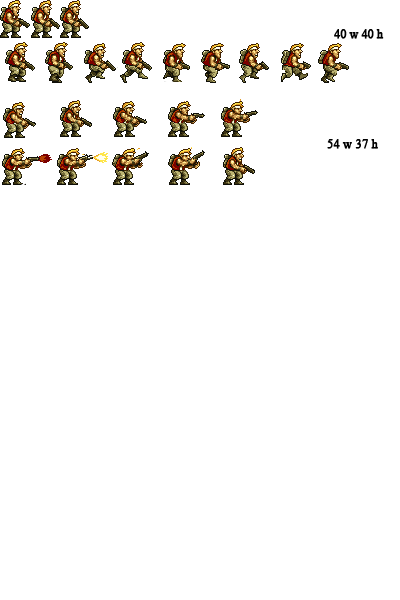
<style>
.page{position:relative;width:400px;height:600px;background:#ffffff}
.page>*{position:absolute;margin:0}
.t1{font:12.3px "TimesNewRomanPSMT";color:#000000;font-weight:bold;scale:0.94 1}
.t2{font:12.3px "TimesNewRomanPSMT";color:#000000;font-weight:bold}
</style>
<div class="page">
<p class="t1" style="left:334px;top:29px;width:50px;height:10px">40 w 40 h</p>
<p class="t2" style="left:327px;top:139px;width:51px;height:10px">54 w 37 h</p>
</div>
